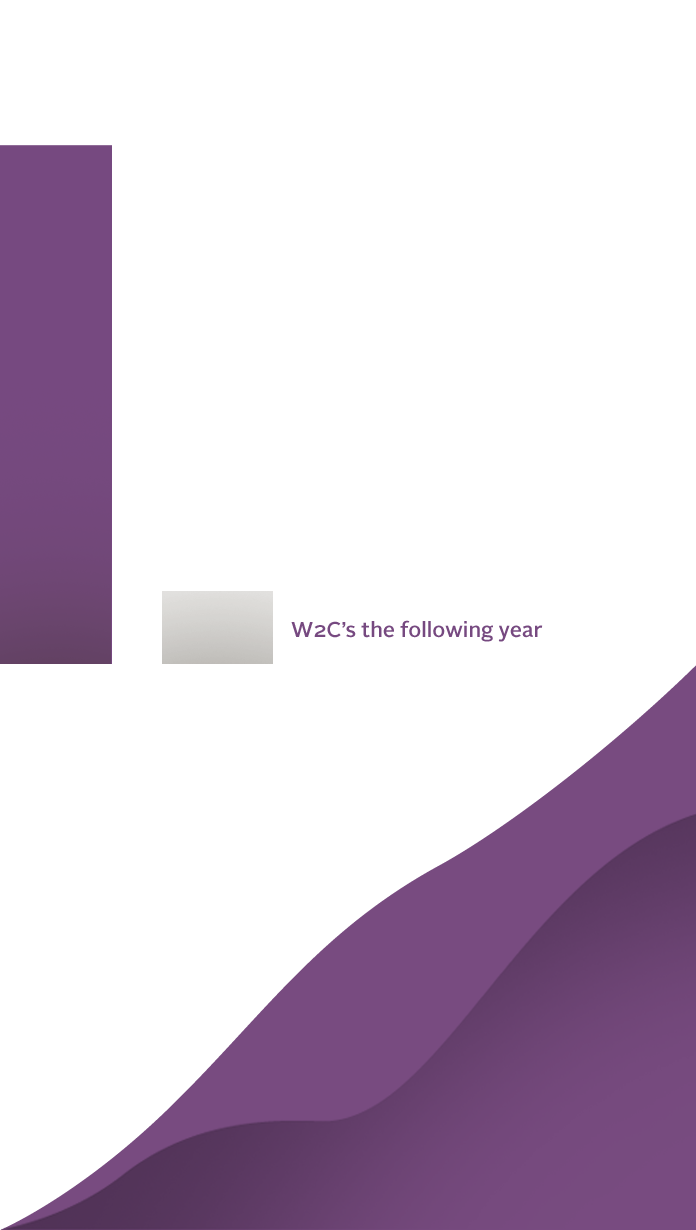
<style>
.page{position:relative;width:696px;height:1230px;background:#ffffff}
.page>*{position:absolute;margin:0}
.t1{font:21.3px "AlrightSans-Medium";color:#764980}
</style>
<div class="page">
<p class="t1" style="left:291px;top:620px;width:252px;height:22px">W2C’s the following year</p>
</div>
